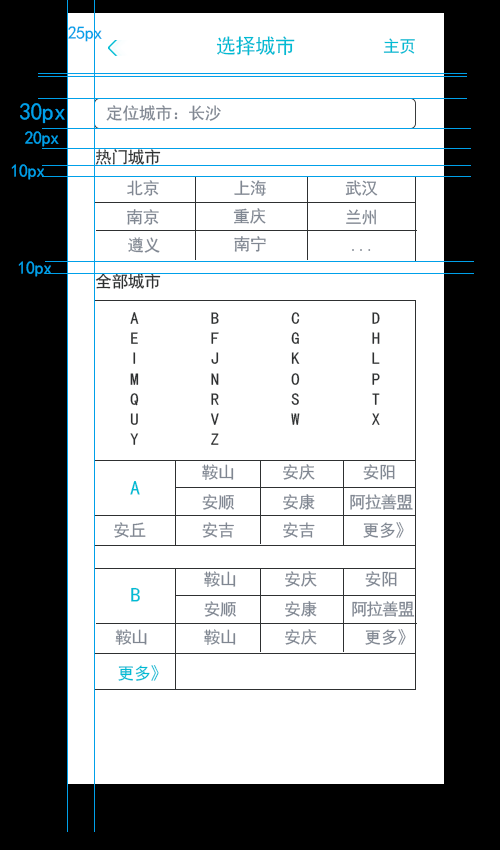
<style>
.page{position:relative;width:500px;height:850px;background:#ffffff}
.page>*{position:absolute;margin:0}
.t1{font:18px "SimHei";letter-spacing:-0.02em;color:#00a0e9}
.t2{font:20.1px "SimHei";letter-spacing:-0.02em;color:#00bcd4}
.t3{font:16.8px "SimHei";letter-spacing:-0.02em;color:#00bcd4}
.t4{font:24px "SimHei";letter-spacing:-0.02em;color:#00a0e9}
.t5{font:16.8px "SimHei";letter-spacing:-0.02em;color:#808792}
.t6{font:16.8px "SimHei";letter-spacing:-0.02em;color:#2e3031}
.t7{font:16.8px/28px "SimHei";letter-spacing:-0.02em;color:#808792}
.t8{font:16.8px/24.6px "SimHei";letter-spacing:-0.02em;color:#808792}
.t9{font:16.8px/30.2px "SimHei";letter-spacing:-0.02em;color:#808792}
.t10{font:16.8px/30.2px "SimHei";letter-spacing:-0.06em;color:#808792}
.t11{font:16.8px/8.9px "SimHei";letter-spacing:-0.02em;color:#808792}
.t12{font:16.8px/14.5px "SimHei";letter-spacing:-0.02em;color:#808792}
.t13{font:16.8px/15.7px "SimHei";letter-spacing:-0.02em;color:#808792}
.t14{font:16.8px/15.7px "SimHei";letter-spacing:-0.06em;color:#808792}
.t15{font:16.8px/15.7px "SimHei";letter-spacing:-0.1em;color:#808792}
.t16{font:16.8px/10.1px "SimHei";letter-spacing:-0.02em;color:#808792}
</style>
<div class="page">
<p class="t1" style="left:68px;top:26px;width:34px;height:16px">25px</p>
<p class="t2" style="left:216px;top:36px;width:79px;height:20px">选择城市</p>
<p class="t3" style="left:383px;top:38px;width:32px;height:16px">主页</p>
<p class="t4" style="left:20px;top:103px;width:45px;height:21px">30px</p>
<p class="t5" style="left:106px;top:105px;width:115px;height:16px">定位城市：长沙</p>
<p class="t1" style="left:25px;top:131px;width:34px;height:16px">20px</p>
<p class="t6" style="left:95px;top:149px;width:66px;height:16px">热门城市</p>
<p class="t1" style="left:11px;top:164px;width:34px;height:16px">10px</p>
<p class="t5" style="left:127px;top:180px;width:32px;height:16px">北京</p>
<p class="t5" style="left:234px;top:180px;width:32px;height:16px">上海</p>
<p class="t5" style="left:345px;top:180px;width:33px;height:16px">武汉</p>
<p class="t5" style="left:127px;top:209px;width:32px;height:16px">南京</p>
<p class="t5" style="left:233px;top:208px;width:33px;height:16px">重庆</p>
<p class="t5" style="left:346px;top:209px;width:30px;height:16px">兰州</p>
<p class="t5" style="left:128px;top:237px;width:32px;height:16px">遵义</p>
<p class="t5" style="left:234px;top:236px;width:32px;height:16px">南宁</p>
<p class="t5" style="left:352px;top:249px;width:19px;height:2px">...</p>
<p class="t1" style="left:18px;top:261px;width:34px;height:16px">10px</p>
<p class="t6" style="left:95px;top:273px;width:66px;height:16px">全部城市</p>
<p class="t6" style="left:130px;top:312px;width:250px;height:133px">A    B    C    D<br>E    F    G    H<br>I    J    K    L<br>M    N    O    P<br>Q    R    S    T<br>U    V    W    X<br>Y    Z</p>
<p class="t7" style="left:114px;top:464px;width:299px;height:74px"><span class="t3">     </span><span class="t8">鞍山   安庆   安阳<br>     </span><span class="t9">安顺   安</span><span class="t10">康   阿拉善盟<br></span>安丘    安吉   安吉     更多》</p>
<p class="t2" style="left:130px;top:481px;width:10px;height:14px">A</p>
<p class="t7" style="left:115px;top:571px;width:300px;height:74px"><span class="t11">      </span><span class="t12">鞍山   安庆   安阳<br><br>       </span><span class="t13">安顺   安</span><span class="t14">康   </span><span class="t15">阿</span><span class="t14">拉善盟<br> </span><span class="t16">鞍山    </span>鞍山   安庆   更多》</p>
<p class="t2" style="left:131px;top:587px;width:9px;height:15px">B</p>
<p class="t3" style="left:118px;top:665px;width:41px;height:16px">更多》</p>
</div>
